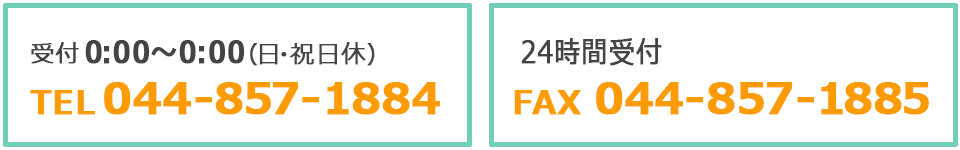
<style>
.page{position:relative;width:960px;height:150px;background:#ffffff}
.page>*{position:absolute;margin:0}
.t1{font:30px "Meiryo-Bold";color:#444444;font-weight:bold;scale:0.88 1}
.t2{font:28.9px "Meiryo-Bold";color:#444444;font-weight:bold;scale:0.88 1}
.t3{font:30px "Meiryo";color:#444444;font-weight:bold;scale:0.88 1}
.t4{font:24px "Meiryo";color:#444444;font-weight:bold}
.t5{font:43.1px "Meiryo-Bold";color:#fd9b01;font-weight:bold}
.t6{font:32px "Meiryo-Bold";color:#fd9b01;font-weight:bold}
</style>
<div class="page">
<p class="t1" style="left:85px;top:40px;width:160px;height:24px"><span class="t2"> </span>0：00〜0：00</p>
<p class="t3" style="left:521px;top:38px;width:141px;height:28px">24時間受付</p>
<p class="t4" style="left:31px;top:42px;width:48px;height:22px">受付</p>
<p class="t4" style="left:250px;top:42px;width:125px;height:24px">（日・祝日休）</p>
<p class="t5" style="left:104px;top:82px;width:336px;height:33px">044-857-1884</p>
<p class="t5" style="left:596px;top:82px;width:333px;height:33px">044-857-1885</p>
<p class="t6" style="left:30px;top:90px;width:65px;height:25px">TEL</p>
<p class="t6" style="left:514px;top:90px;width:67px;height:25px">FAX</p>
</div>
